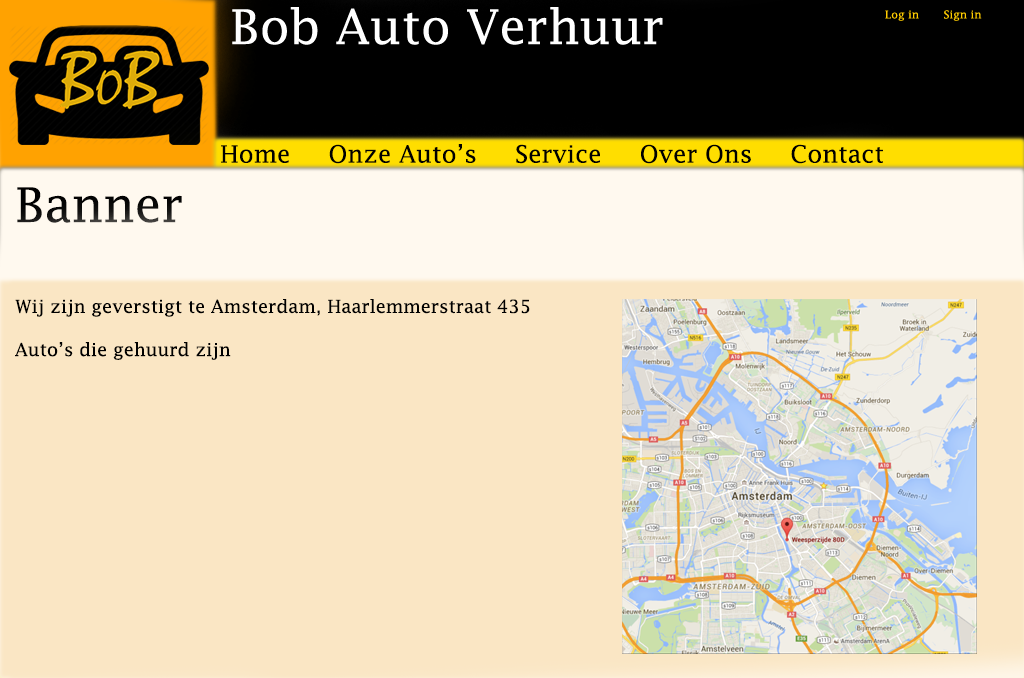
<style>
.page{position:relative;width:1024px;height:678px;background:#fae6c4}
.page>*{position:absolute;margin:0}
.t1{font:24px "LucidaFax";color:#000000}
.t2{font:48px "LucidaFax";color:#000000}
.t3{font:18px "LucidaFax";color:#000000}
</style>
<div class="page">
<p class="t1" style="left:221px;top:144px;width:662px;height:20px">Home     Onze Auto’s     Service     Over Ons     Contact</p>
<p class="t2" style="left:17px;top:187px;width:165px;height:36px">Banner</p>
<p class="t3" style="left:15px;top:299px;width:515px;height:61px">Wij zijn geverstigt te Amsterdam, Haarlemmerstraat 435<br><br>Auto’s die gehuurd zijn</p>
</div>
